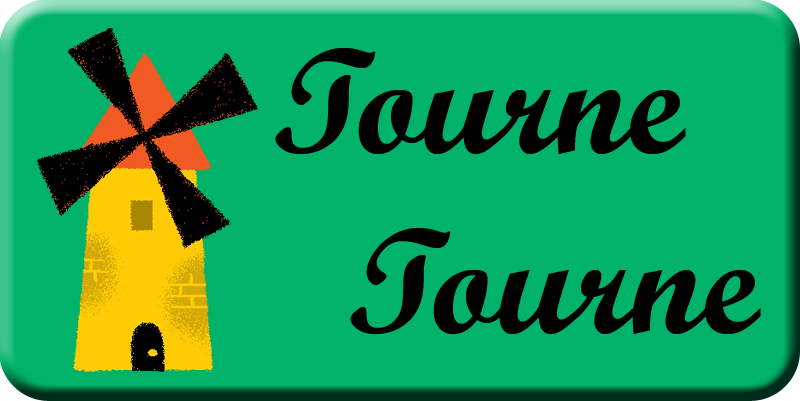
<style>
.page{position:relative;width:800px;height:401px;background:#00b26a}
.page>*{position:absolute;margin:0}
.t1{font:150px "ScriptMTBold";color:#000000}
</style>
<div class="page">
<p class="t1" style="left:275px;top:48px;width:486px;height:287px">Tourne<br>  Tourne</p>
</div>
